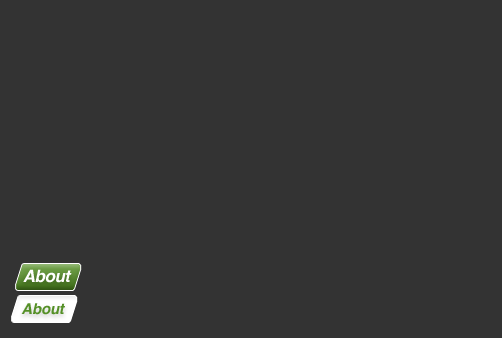
<style>
.page{position:relative;width:502px;height:338px;background:#333333}
.page>*{position:absolute;margin:0}
.t1{font:17px "Helvetica-BoldOblique";color:#ffffff}
.t2{font:15px "Helvetica-BoldOblique";color:#559027}
</style>
<div class="page">
<p class="t1" style="left:23px;top:269px;width:49px;height:14px">About</p>
<p class="t2" style="left:21px;top:303px;width:44px;height:12px">About</p>
</div>
